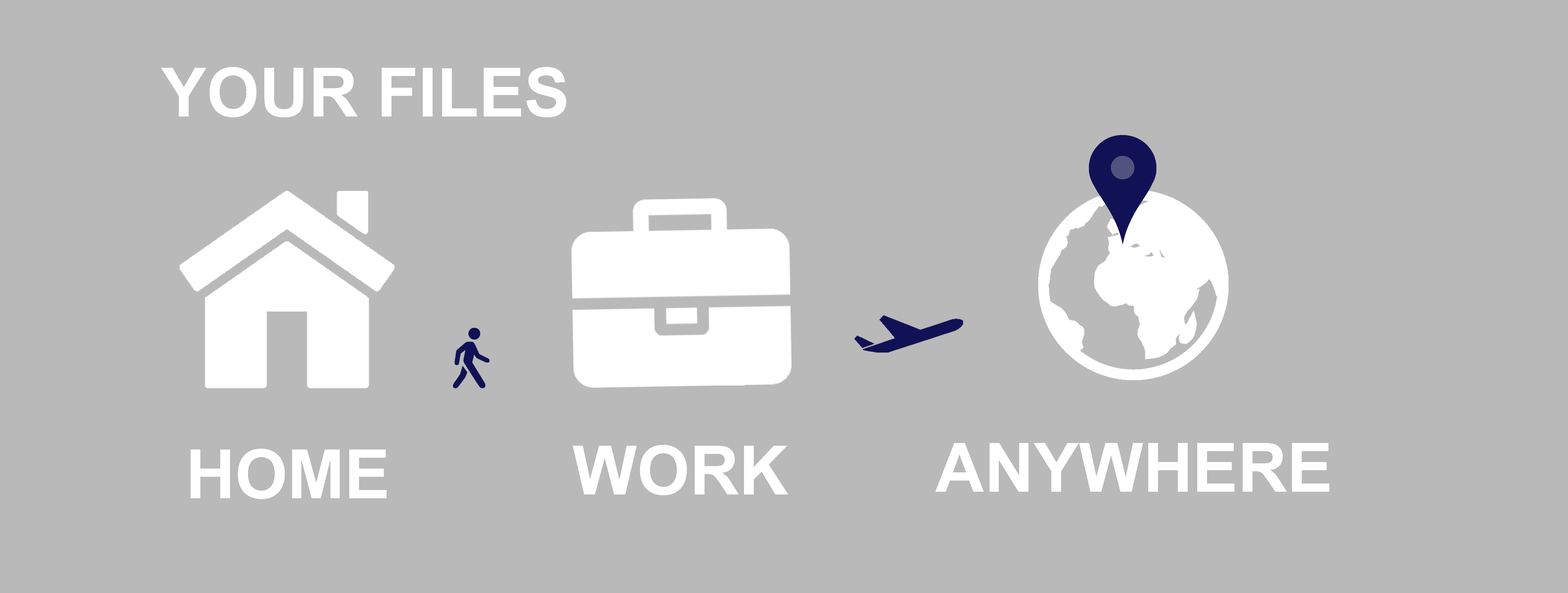
<style>
.page{position:relative;width:1568px;height:593px;background:#b9b9b9}
.page>*{position:absolute;margin:0}
.t1{font:68.1px "Arial-BoldMT";color:#ffffff;text-transform:uppercase}
</style>
<div class="page">
<p class="t1" style="left:161px;top:67px;width:405px;height:50px">Your Files</p>
<p class="t1" style="left:191px;top:449px;width:196px;height:50px">home</p>
<p class="t1" style="left:573px;top:445px;width:215px;height:50px">work</p>
<p class="t1" style="left:935px;top:443px;width:394px;height:49px">anywhere</p>
</div>
